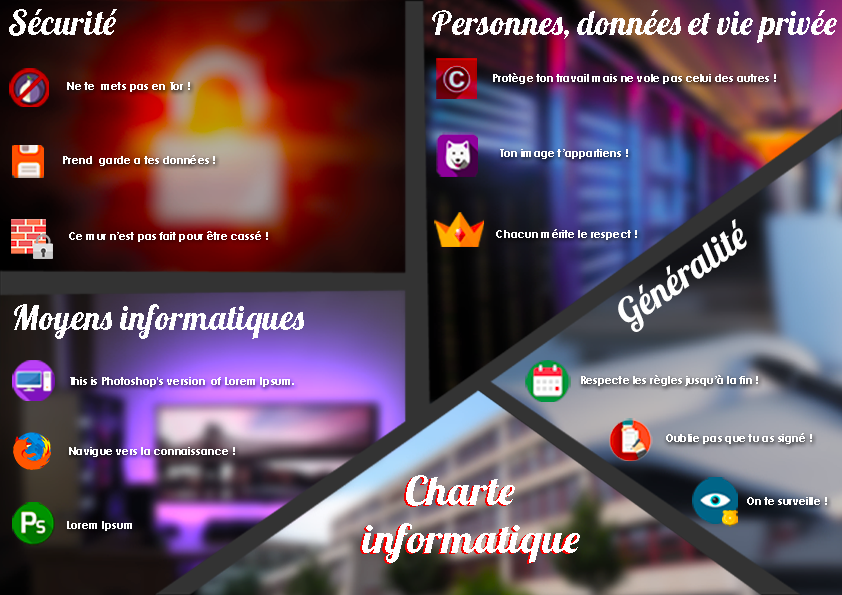
<style>
.page{position:relative;width:842px;height:595px}
.page>*{position:absolute;margin:0}
.t1{font:34.3px "Lobster1.4";color:#ffffff}
.t2{font:33.7px "Lobster1.4";color:#ffffff}
.t3{font:11px "CenturyGothic-Bold";color:#ffffff}
.t4{font:37.9px "Lobster1.4";color:#ffffff}
.t5{font:39.7px "Lobster1.4";scale:1.09 1}
.t6{font:39.7px "Lobster1.4";color:#ffffff;scale:1.09 1}
</style>
<div class="page">
<p class="t1" style="left:9px;top:9px;width:108px;height:27px">Sécurité</p>
<p class="t2" style="left:432px;top:10px;width:405px;height:33px">Personnes, données et vie privée</p>
<p class="t3" style="left:493px;top:73px;width:283px;height:11px">Protège ton travail mais ne vole pas celui des autres !</p>
<p class="t3" style="left:67px;top:82px;width:123px;height:10px">Ne te  mets pas en Tor !</p>
<p class="t3" style="left:500px;top:149px;width:128px;height:10px">Ton image t’appartiens !</p>
<p class="t3" style="left:63px;top:155px;width:152px;height:11px">Prend  garde a tes données !</p>
<p class="t4" style="left:618px;top:219px;width:129px;height:113px;rotate:-35deg">Généralité</p>
<p class="t3" style="left:69px;top:231px;width:199px;height:11px">Ce mur n’est pas fait pour être cassé !</p>
<p class="t3" style="left:496px;top:229px;width:141px;height:11px">Chacun mérite le respect !</p>
<p class="t1" style="left:14px;top:304px;width:290px;height:35px">Moyens informatiques</p>
<p class="t3" style="left:70px;top:377px;width:224px;height:10px">This is Photoshop's version  of Lorem Ipsum.</p>
<p class="t3" style="left:581px;top:375px;width:177px;height:11px">Respecte les règles jusqu’à la fin !</p>
<p class="t3" style="left:666px;top:433px;width:146px;height:11px">Oublie pas que tu as signé !</p>
<p class="t3" style="left:69px;top:447px;width:166px;height:10px">Navigue vers la connaissance !</p>
<p class="t5" style="left:360px;top:476px;width:217px;height:88px">Charte<br>informatique</p>
<p class="t6" style="left:362px;top:475px;width:218px;height:88px">Charte<br>informatique</p>
<p class="t3" style="left:747px;top:497px;width:80px;height:8px">On te surveille !</p>
<p class="t3" style="left:67px;top:521px;width:65px;height:10px">Lorem Ipsum</p>
</div>
